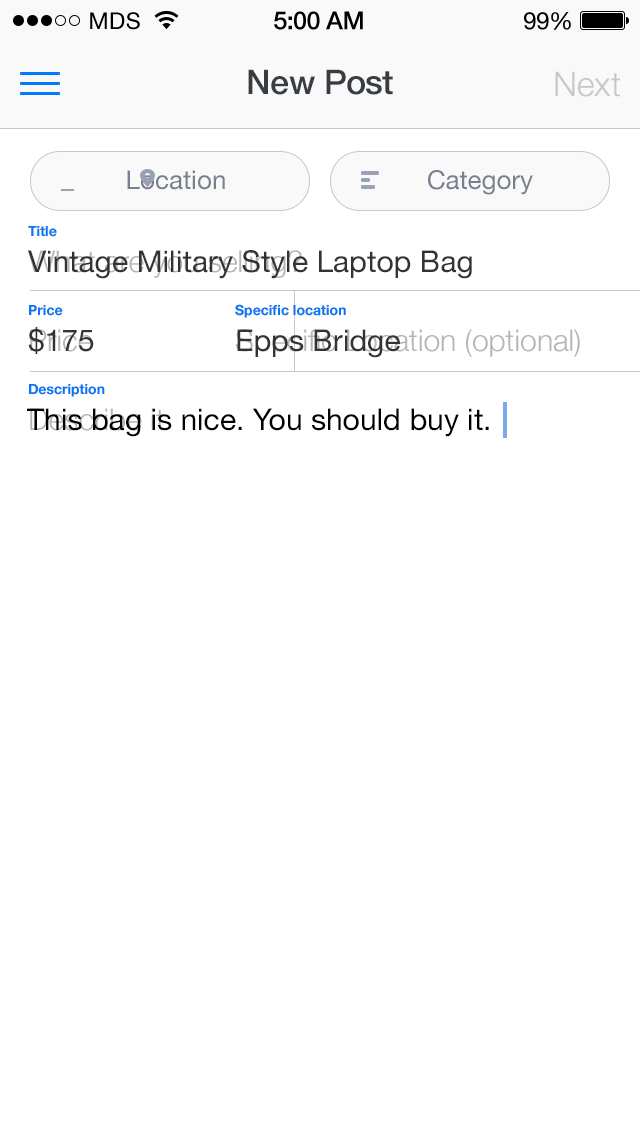
<style>
.page{position:relative;width:640px;height:1136px;background:#ffffff}
.page>*{position:absolute;margin:0}
.t1{font:34px "HelveticaNeue-Medium";letter-spacing:-0.015em;color:#383c43}
.t2{font:34px "HelveticaNeue-Light";color:#c5c7cc}
.t3{font:26px "HelveticaNeue";color:#787f8e}
.t4{font:14px "HelveticaNeue-Bold";color:#0079ff}
.t5{font:30px "HelveticaNeue-Light"}
.t6{font:30px "HelveticaNeue";color:#333333}
.t7{font:30px "HelveticaNeue-Light";color:#b5b5b5}
.t8{font:30px "HelveticaNeue";color:#000000}
</style>
<div class="page">
<p class="t1" style="left:248px;top:69px;width:145px;height:26px">New Post</p>
<p class="t2" style="left:555px;top:71px;width:65px;height:26px">Next</p>
<p class="t3" style="left:127px;top:170px;width:98px;height:20px">Location</p>
<p class="t3" style="left:428px;top:170px;width:105px;height:25px">Category</p>
<p class="t4" style="left:28px;top:226px;width:29px;height:11px">Title</p>
<p class="t4" style="left:28px;top:226px;width:29px;height:11px">Title</p>
<p class="t5" style="left:28px;top:250px;width:274px;height:28px">What are you selling?</p>
<p class="t6" style="left:28px;top:250px;width:444px;height:29px">Vintage Military Style Laptop Bag</p>
<p class="t4" style="left:29px;top:305px;width:34px;height:11px">Price</p>
<p class="t4" style="left:29px;top:305px;width:34px;height:11px">Price</p>
<p class="t4" style="left:235px;top:304px;width:111px;height:14px">Specific location</p>
<p class="t4" style="left:235px;top:304px;width:111px;height:14px">Specific location</p>
<p class="t6" style="left:28px;top:327px;width:66px;height:27px">$175</p>
<p class="t7" style="left:236px;top:329px;width:344px;height:28px">Specific Location (optional)</p>
<p class="t6" style="left:237px;top:329px;width:163px;height:29px">Epps Bridge</p>
<p class="t4" style="left:29px;top:384px;width:76px;height:13px">Description</p>
<p class="t4" style="left:29px;top:384px;width:76px;height:13px">Description</p>
<p class="t8" style="left:27px;top:408px;width:462px;height:29px">This bag is nice. You should buy it.</p>
<p class="t5" style="left:30px;top:408px;width:134px;height:23px">Describe it</p>
</div>
